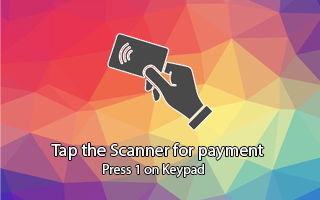
<style>
.page{position:relative;width:320px;height:200px}
.page>*{position:absolute;margin:0}
.t1{font:17.8px "MyriadPro-Regular";color:#ffffff}
.t2{font:13.7px "MyriadPro-Regular";color:#ffffff}
</style>
<div class="page">
<p class="t1" style="left:51px;top:143px;width:213px;height:17px">Tap the Scanner for payment</p>
<p class="t2" style="left:103px;top:164px;width:101px;height:13px">Press 1 on Keypad</p>
</div>
